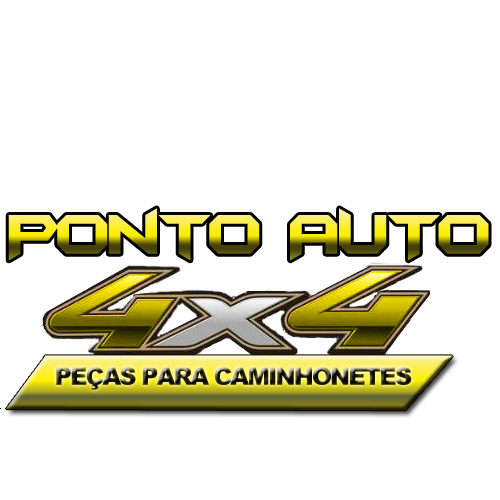
<style>
.page{position:relative;width:500px;height:500px;background:#ffffff}
.page>*{position:absolute;margin:0}
.t1{font:66px "BatmanForeverAlternate";letter-spacing:-0.075em}
.t2{font:24px "Arial-Black";letter-spacing:-0.075em}
</style>
<div class="page">
<p class="t1" style="left:8px;top:208px;width:481px;height:53px">Ponto AUTO</p>
<p class="t2" style="left:56px;top:367px;width:356px;height:23px">PEÇAS PARA CAMINHONETES</p>
</div>
